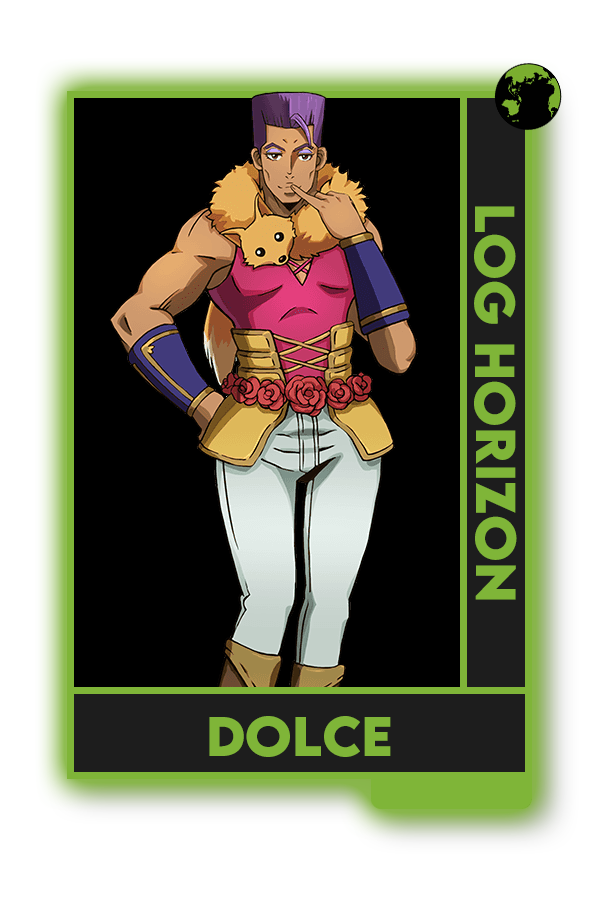
<style>
.page{position:relative;width:600px;height:900px;background:#000000}
.page>*{position:absolute;margin:0}
.t1{font:50px "LEMONMILK-Bold";color:#7fad41}
</style>
<div class="page">
<p class="t1" style="left:474px;top:206px;width:43px;height:394px;rotate:90deg">Log Horizon</p>
<p class="t1" style="left:209px;top:716px;width:182px;height:41px">Dolce</p>
</div>
